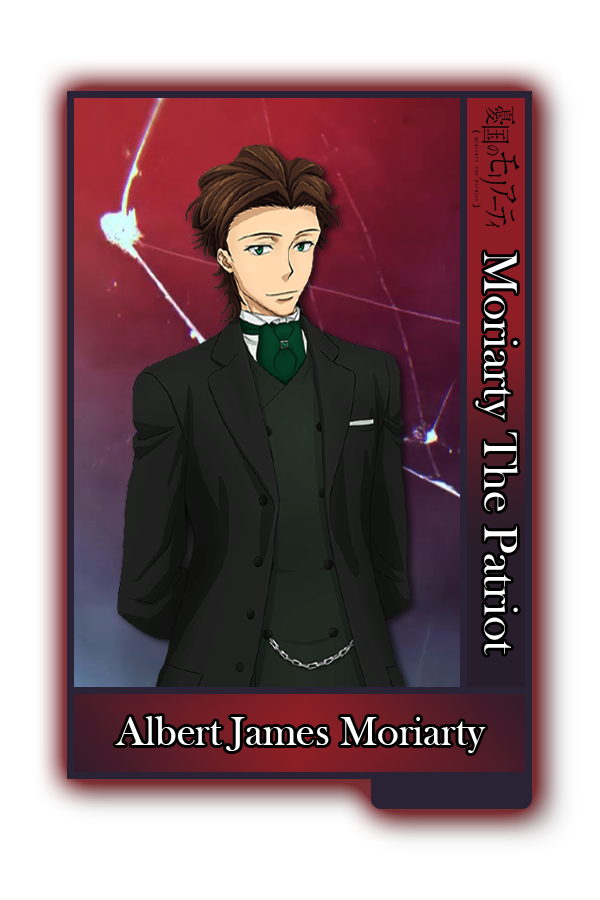
<style>
.page{position:relative;width:600px;height:900px;background:#ffffff}
.page>*{position:absolute;margin:0}
.t1{font:48.8px "BaskOldFace";color:#ffffff}
.t2{font:41.7px "BaskOldFace";color:#ffffff}
</style>
<div class="page">
<p class="t1" style="left:475px;top:252px;width:43px;height:403px;rotate:90deg">Moriarty The Patriot</p>
<p class="t2" style="left:115px;top:716px;width:371px;height:37px">Albert James Moriarty</p>
</div>
